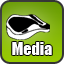
<style>
.page{position:relative;width:64px;height:64px}
.page>*{position:absolute;margin:0}
.t1{font:16px "Impact";color:#ffffff}
</style>
<div class="page">
<p class="t1" style="left:12px;top:42px;width:40px;height:13px">Media</p>
</div>
